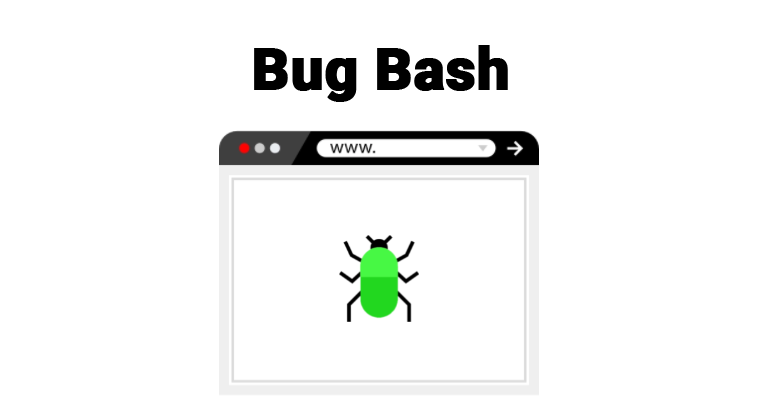
<style>
.page{position:relative;width:760px;height:420px;background:#ffffff}
.page>*{position:absolute;margin:0}
.t1{font:57.6px "Roboto-Black";color:#000000;font-weight:bold}
</style>
<div class="page">
<p class="t1" style="left:254px;top:45px;width:254px;height:57px">Bug Bash</p>
</div>
